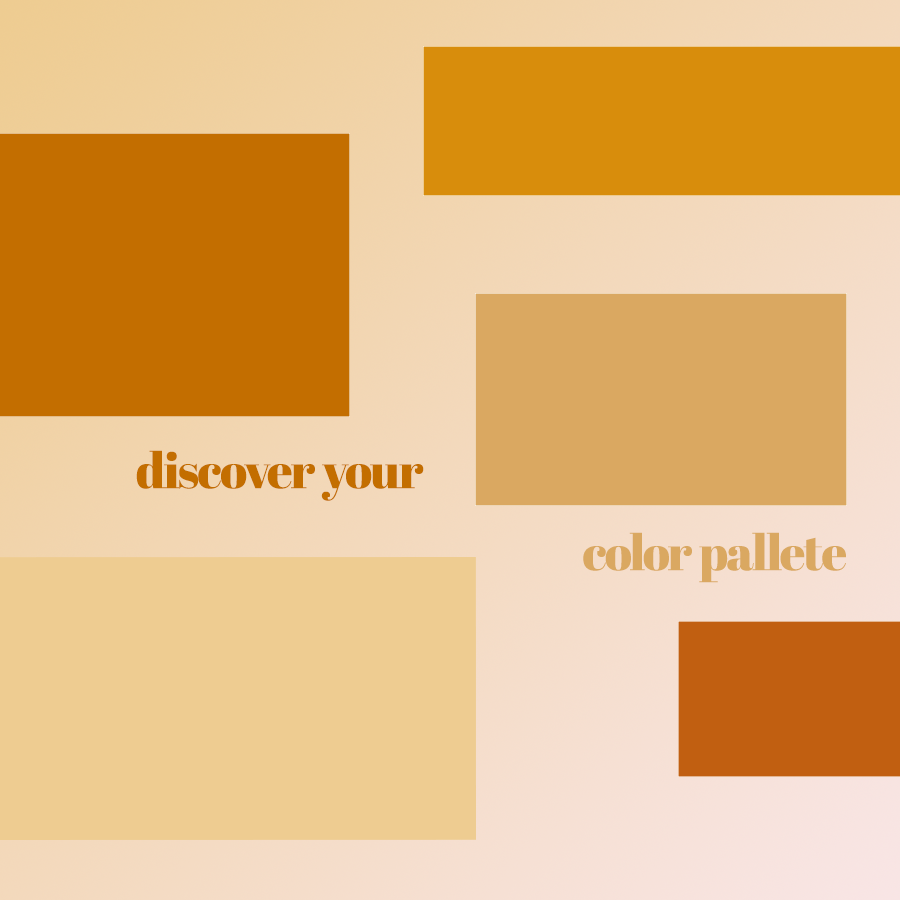
<style>
.page{position:relative;width:900px;height:900px}
.page>*{position:absolute;margin:0}
.t1{font:50px "AbrilFatface-Regular";letter-spacing:-0.025em;color:#c36e00}
.t2{font:50px "AbrilFatface-Regular";letter-spacing:-0.025em;color:#daa861}
</style>
<div class="page">
<p class="t1" style="left:136px;top:450px;width:288px;height:51px">discover your</p>
<p class="t2" style="left:583px;top:532px;width:263px;height:51px">color pallete</p>
</div>
